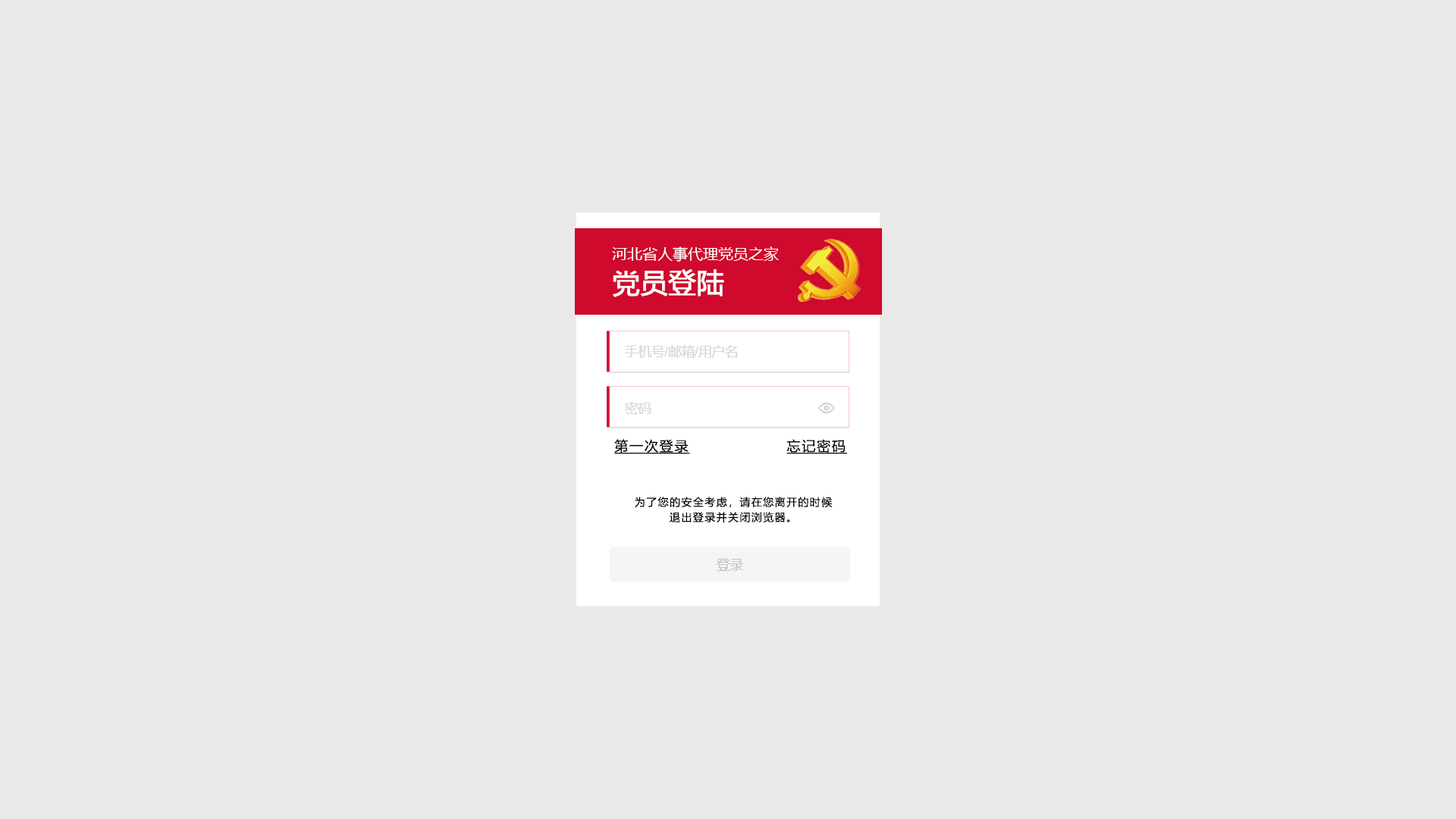
<style>
.page{position:relative;width:1456px;height:819px;background:#e9e9e9}
.page>*{position:absolute;margin:0}
.t1{font:15.2px/22.7px "MicrosoftYaHei";color:#ffffff;text-transform:uppercase}
.t2{font:27.3px/22.7px "MicrosoftYaHei";color:#ffffff;text-transform:uppercase;font-weight:bold}
.t3{font:13.6px "MicrosoftYaHei";letter-spacing:0.1em;color:#000000;text-decoration:underline}
.t4{font:10.6px/15.2px "MicrosoftYaHei";letter-spacing:0.1em;color:#000000}
</style>
<div class="page">
<p class="t1" style="left:612px;top:246px;width:167px;height:51px">河北省人事代理党员之家<br><span class="t2">党员登陆</span></p>
<p class="t3" style="left:614px;top:439px;width:233px;height:15px">第一次登录                  忘记密码</p>
<p class="t4" style="left:635px;top:497px;width:198px;height:25px;text-align:center">为了您的安全考虑，请在您离开的时候<br>退出登录并关闭浏览器。</p>
</div>
